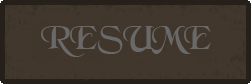
<style>
.page{position:relative;width:251px;height:84px;background:#41372c}
.page>*{position:absolute;margin:0}
.t1{font:32px "BlackChancery";color:#696969}
</style>
<div class="page">
<p class="t1" style="left:41px;top:26px;width:170px;height:31px">RESUME</p>
</div>
